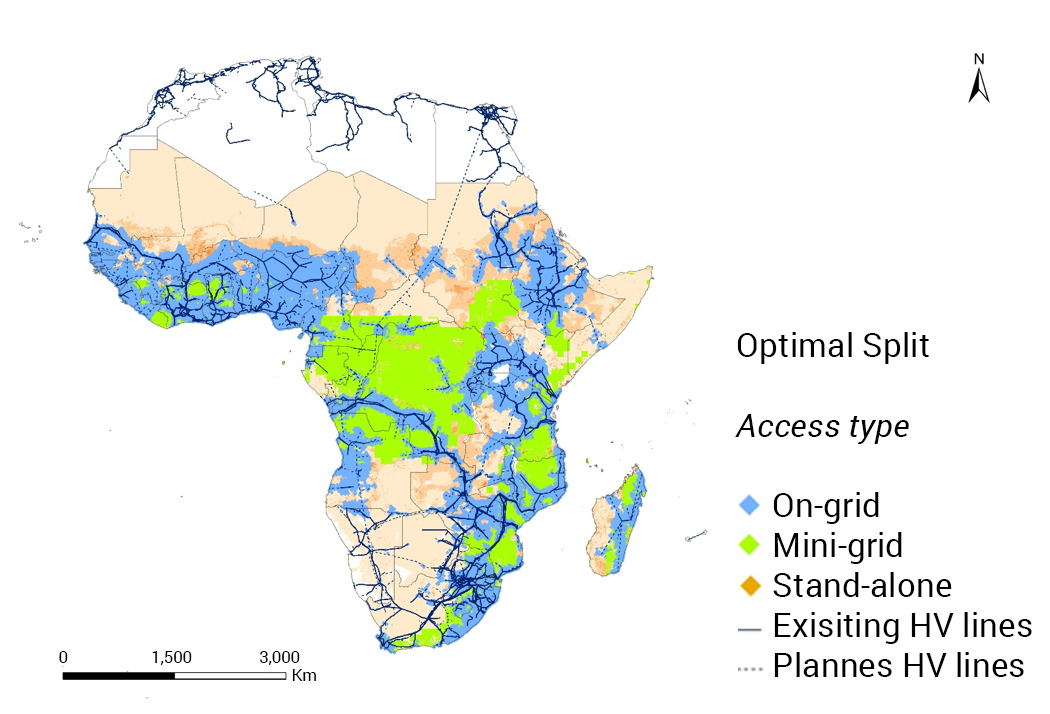
<style>
.page{position:relative;width:1050px;height:714px;background:#ffffff}
.page>*{position:absolute;margin:0}
.t1{font:33.3px "Roboto-Regular";color:#000000}
.t2{font:33.3px "Roboto-Italic";color:#000000}
.t3{font:16.7px "Roboto-Regular";color:#000000}
</style>
<div class="page">
<p class="t1" style="left:735px;top:332px;width:297px;height:345px">Optimal Split<br><span class="t2"><br>Access type<br> <br> </span>On-grid<br> Mini-grid<br> Stand-alone<br> Exisiting HV lines<br> Plannes HV lines</p>
<p class="t3" style="left:59px;top:651px;width:241px;height:14px">0       1,500       3,000</p>
<p class="t3" style="left:292px;top:669px;width:24px;height:12px">Km</p>
</div>
